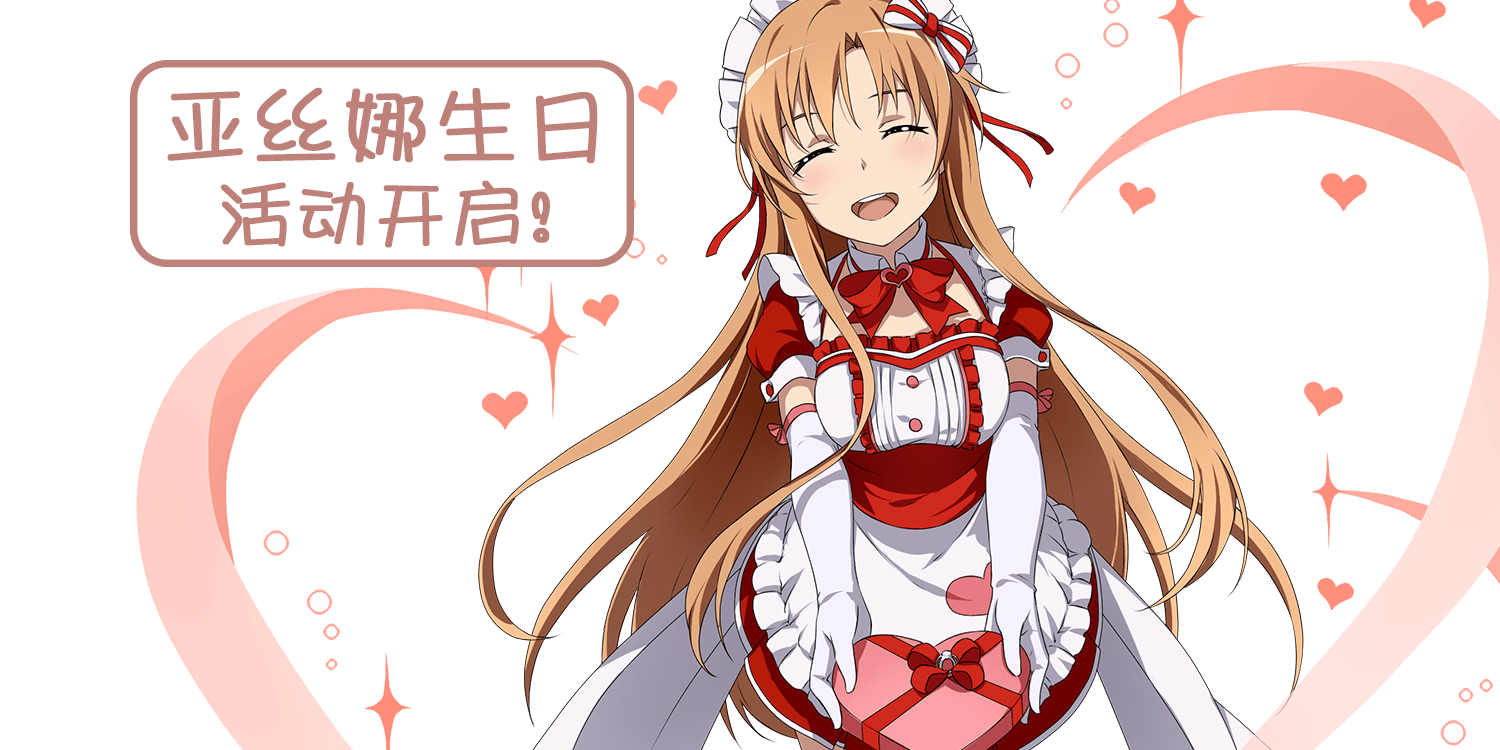
<style>
.page{position:relative;width:1500px;height:750px;background:#ffffff}
.page>*{position:absolute;margin:0}
.t1{font:84px/84px "HYQingKongTiJ";letter-spacing:0.05em;color:#bd817a;font-weight:bold}
.t2{font:72px/84px "HYQingKongTiJ";letter-spacing:0.05em;color:#bd817a;font-weight:bold}
</style>
<div class="page">
<p class="t1" style="left:167px;top:87px;width:431px;height:161px;text-align:center">亚丝娜生日<br><span class="t2">活动开启!</span></p>
</div>
